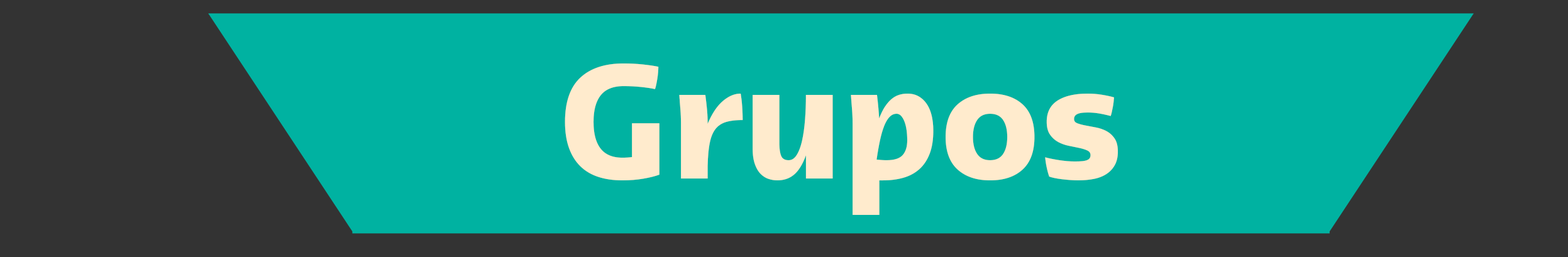
<style>
.page{position:relative;width:1568px;height:257px;background:#00b2a1}
.page>*{position:absolute;margin:0}
.t1{font:166.4px "Qatar2022Arabic-Bold";color:#ffebcd}
</style>
<div class="page">
<p class="t1" style="left:565px;top:63px;width:553px;height:152px">Grupos</p>
</div>
